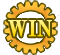
<style>
.page{position:relative;width:60px;height:55px;background:#ffffff}
.page>*{position:absolute;margin:0}
.t1{font:22px "RyuminPro-ExBold";font-weight:bold;scale:0.9 1}
</style>
<div class="page">
<p class="t1" style="left:8px;top:20px;width:44px;height:17px">WIN</p>
</div>
